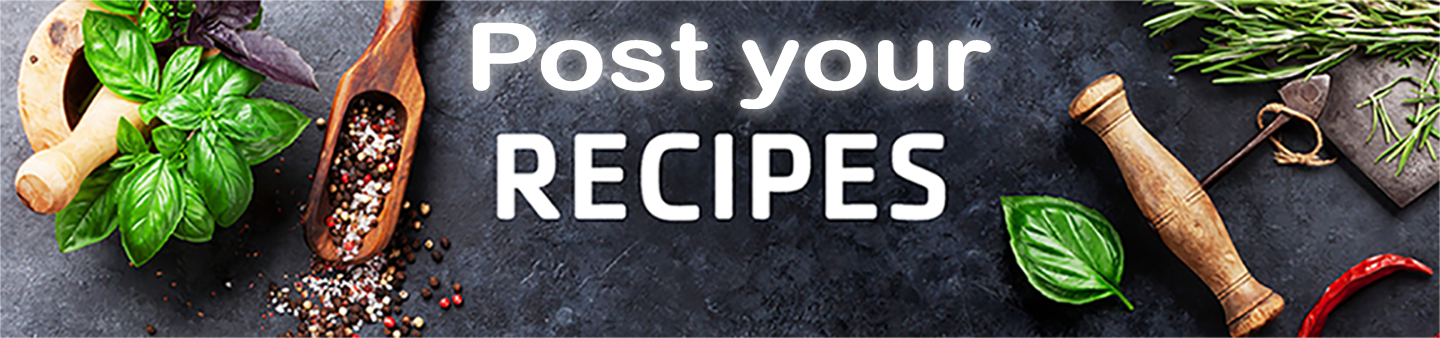
<style>
.page{position:relative;width:1440px;height:338px}
.page>*{position:absolute;margin:0}
.t1{font:92.9px "ArialRoundedMTBold";color:#ffffff;scale:1.25 1}
</style>
<div class="page">
<p class="t1" style="left:472px;top:22px;width:519px;height:88px">Post your</p>
</div>
